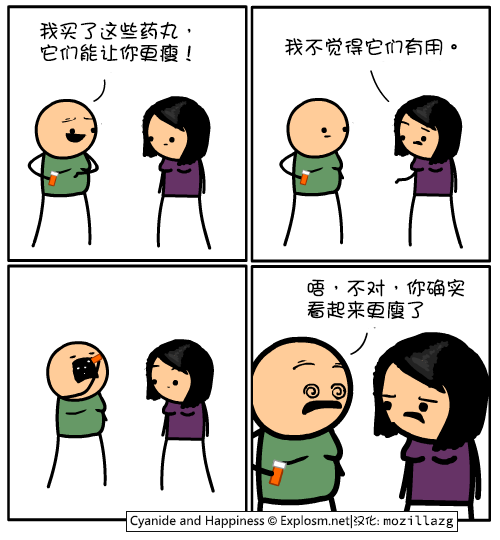
<style>
.page{position:relative;width:500px;height:540px;background:#ffffff}
.page>*{position:absolute;margin:0}
.t1{font:20px/22px "DFGirl";color:#000000}
.t2{font:20px "DFGirl";color:#000000}
</style>
<div class="page">
<p class="t1" style="left:39px;top:21px;width:152px;height:41px">我买了这些药丸，<br>它们能让你更瘦！</p>
<p class="t2" style="left:284px;top:37px;width:173px;height:19px">我不觉得它们有用。</p>
<p class="t1" style="left:307px;top:279px;width:158px;height:40px">唔，不对，你确实<br>看起来更廋了</p>
</div>
